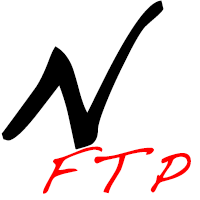
<style>
.page{position:relative;width:200px;height:200px;background:#ffffff}
.page>*{position:absolute;margin:0}
.t1{font:200px "Handwriting-Dakota";letter-spacing:0.2em;color:#000000;font-weight:bold}
.t2{font:60px "Handwriting-Dakota";letter-spacing:0.2em;color:#ff0000;font-weight:bold}
</style>
<div class="page">
<p class="t1" style="left:1px;top:0px;width:163px;height:150px">N</p>
<p class="t2" style="left:43px;top:146px;width:148px;height:48px">FTP</p>
</div>
